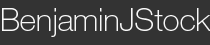
<style>
.page{position:relative;width:210px;height:45px;background:#333333}
.page>*{position:absolute;margin:0}
.t1{font:31.3px "HelveticaNeue-Thin";color:#f8f8f8}
</style>
<div class="page">
<p class="t1" style="left:2px;top:8px;width:209px;height:29px">BenjaminJStock</p>
</div>
